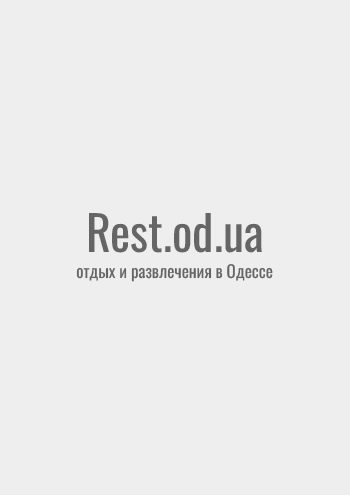
<style>
.page{position:relative;width:350px;height:495px;background:#eeeeee}
.page>*{position:absolute;margin:0}
.t1{font:48px "Oswald-Regular";color:#656565}
.t2{font:17px "Oswald-Regular";color:#656565}
</style>
<div class="page">
<p class="t1" style="left:89px;top:213px;width:173px;height:40px">Rest.od.ua</p>
<p class="t2" style="left:76px;top:264px;width:197px;height:18px">отдых и развлечения в Одессе</p>
</div>
